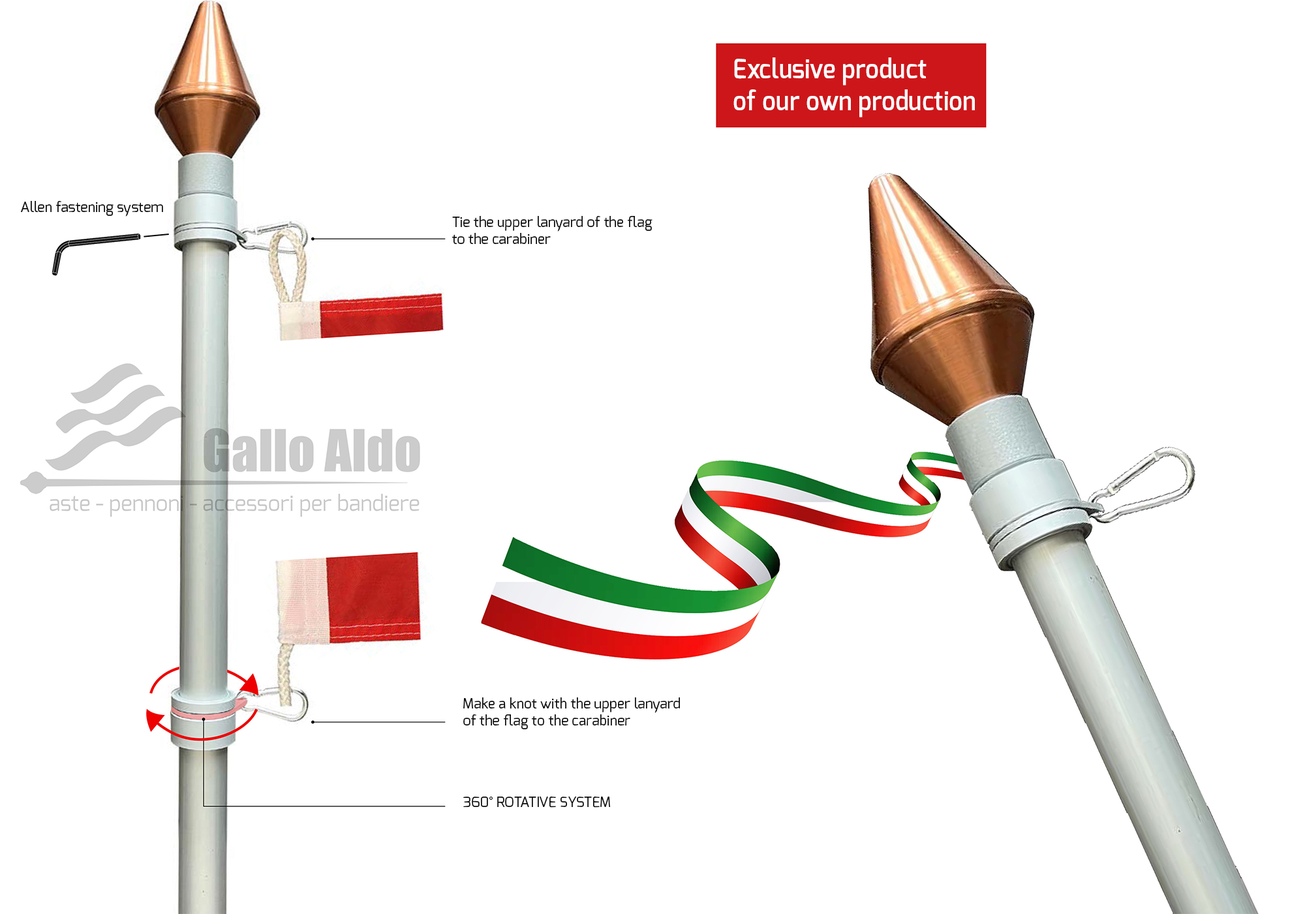
<style>
.page{position:relative;width:1305px;height:914px;background:#ffffff}
.page>*{position:absolute;margin:0}
.t1{font:26.3px "Exo-DemiBold";color:#ffffff;scale:0.93 1}
.t2{font:14px "Exo-Regular";color:#0d0d0d}
</style>
<div class="page">
<p class="t1" style="left:733px;top:57px;width:242px;height:60px">Exclusive product <br>of our own production</p>
<p class="t2" style="left:21px;top:201px;width:142px;height:16px">Allen fastening system</p>
<p class="t2" style="left:451px;top:216px;width:201px;height:28px">Tie the upper lanyard of the flag <br>to the carabiner</p>
<p class="t2" style="left:463px;top:697px;width:217px;height:32px">Make a knot with the upper lanyard <br>of the flag to the carabiner</p>
<p class="t2" style="left:463px;top:797px;width:147px;height:11px">360° ROTATIVE SYSTEM</p>
</div>
